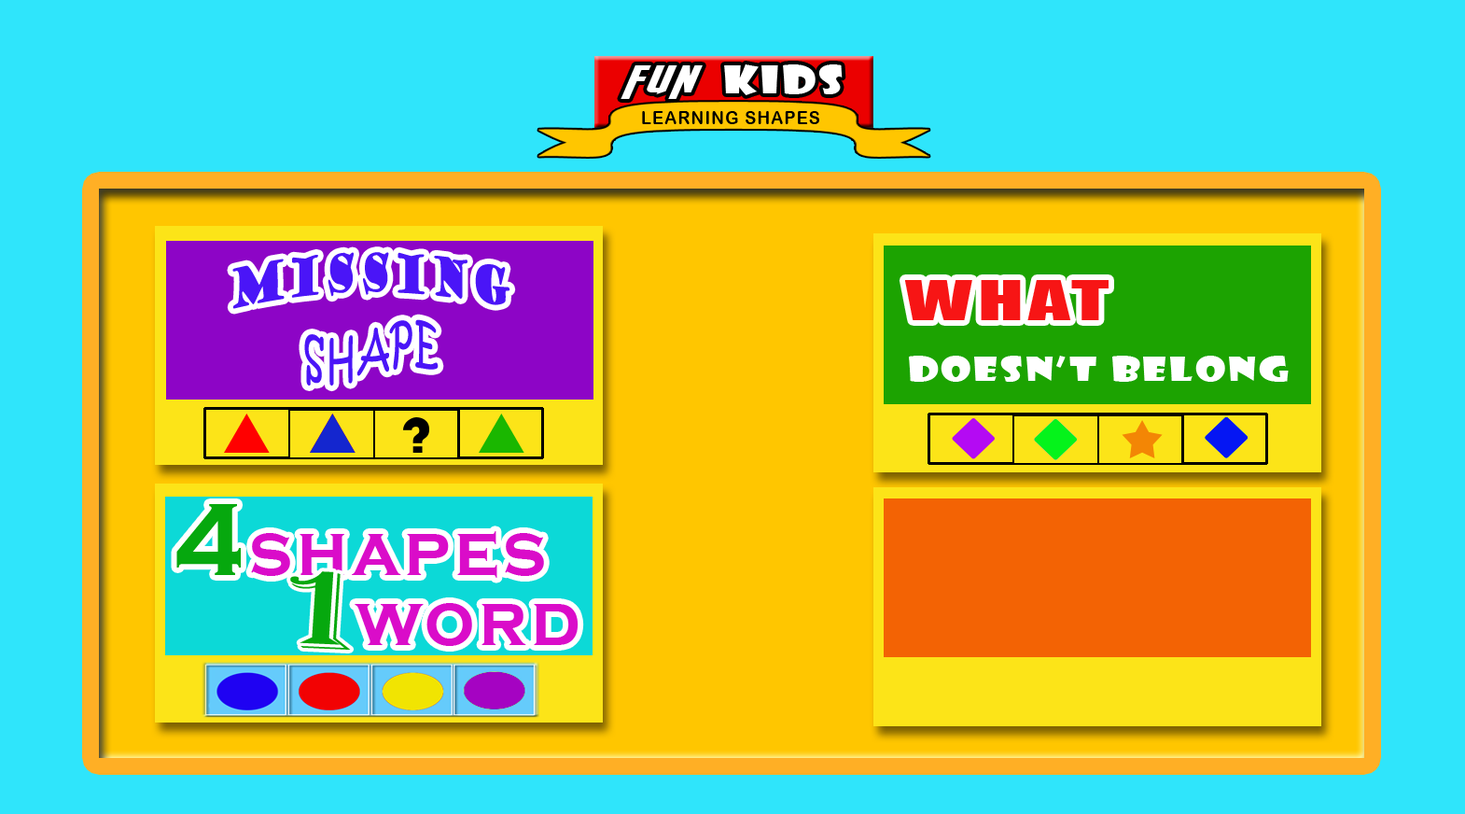
<style>
.page{position:relative;width:1465px;height:814px;background:#2fe5fb}
.page>*{position:absolute;margin:0}
.t1{font:37.5px "AvengeanceHeroicAvengerItalic";letter-spacing:0.06em;color:#ffffff;scale:1.43 1}
.t2{font:37.5px "ShowcardGothic-Reg";letter-spacing:0.06em;color:#ffffff;scale:1.28 1}
.t3{font:18.2px "ArialRoundedMTBold";letter-spacing:0.06em;color:#000000;scale:0.93 1}
.t4{font:51.7px "GoudyStout";letter-spacing:0.06em;color:#4a15f7;scale:0.65 1}
.t5{font:51.7px "Impact";letter-spacing:0.06em;color:#f71515;scale:1.6 1}
.t6{font:51.7px "KristenITC-Regular";letter-spacing:0.06em;color:#4a15f7;scale:0.65 1}
.t7{font:31.6px "ShowcardGothic-Reg";letter-spacing:0.06em;color:#ffffff;scale:1.38 1}
.t8{font:75.3px "CopperplateGothic-Bold";letter-spacing:0.06em;color:#da0cc9;scale:0.93 1}
.t9{font:106.1px "CopperplateGothic-Bold";letter-spacing:0.06em;color:#06a80e;scale:0.93 1}
.t10{font:116.6px "Algerian";letter-spacing:0.06em;color:#06a80e;scale:1.61 1}
.t11{font:74.7px "CopperplateGothic-Bold";letter-spacing:0.06em;color:#da0cc9;scale:0.94 1}
</style>
<div class="page">
<p class="t1" style="left:621px;top:65px;width:82px;height:34px">fun</p>
<p class="t2" style="left:724px;top:64px;width:119px;height:31px">kids</p>
<p class="t3" style="left:642px;top:111px;width:177px;height:13px">LEARNING SHAPES</p>
<p class="t4" style="left:232px;top:252px;width:279px;height:57px">MISSING</p>
<p class="t5" style="left:904px;top:280px;width:205px;height:40px">WHAT</p>
<p class="t6" style="left:304px;top:319px;width:135px;height:67px">SHAPE</p>
<p class="t7" style="left:909px;top:356px;width:380px;height:26px">DOESN’T BELONG</p>
<p class="t8" style="left:176px;top:504px;width:368px;height:74px"><span class="t9">4</span>shapes</p>
<p class="t10" style="left:290px;top:571px;width:61px;height:79px;rotate:2deg">1</p>
<p class="t11" style="left:355px;top:603px;width:224px;height:43px">word</p>
</div>
